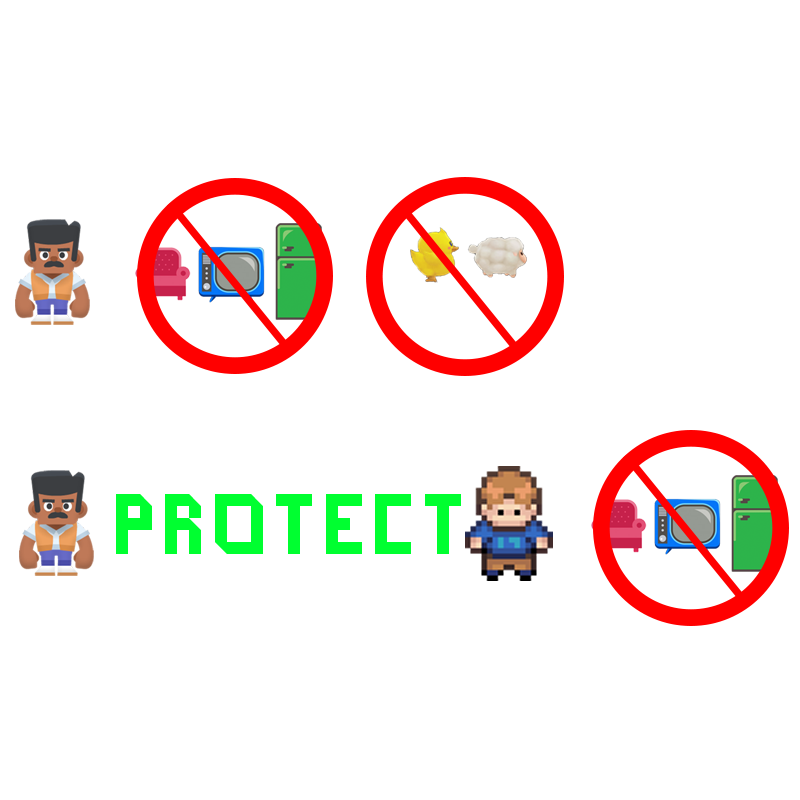
<style>
.page{position:relative;width:800px;height:800px;background:#ffffff}
.page>*{position:absolute;margin:0}
.t1{font:60px "PixelFont";letter-spacing:0.025em;color:#00ff30}
</style>
<div class="page">
<p class="t1" style="left:116px;top:494px;width:345px;height:60px">protect</p>
</div>
